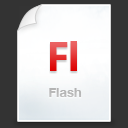
<style>
.page{position:relative;width:128px;height:128px;background:#333333}
.page>*{position:absolute;margin:0}
.t1{font:42px "MyriadPro-Bold"}
.t2{font:13px "HelveticaNeue-Bold";color:#cccccc}
</style>
<div class="page">
<p class="t1" style="left:50px;top:41px;width:27px;height:30px">Fl</p>
<p class="t2" style="left:49px;top:88px;width:33px;height:9px">Flash</p>
</div>
